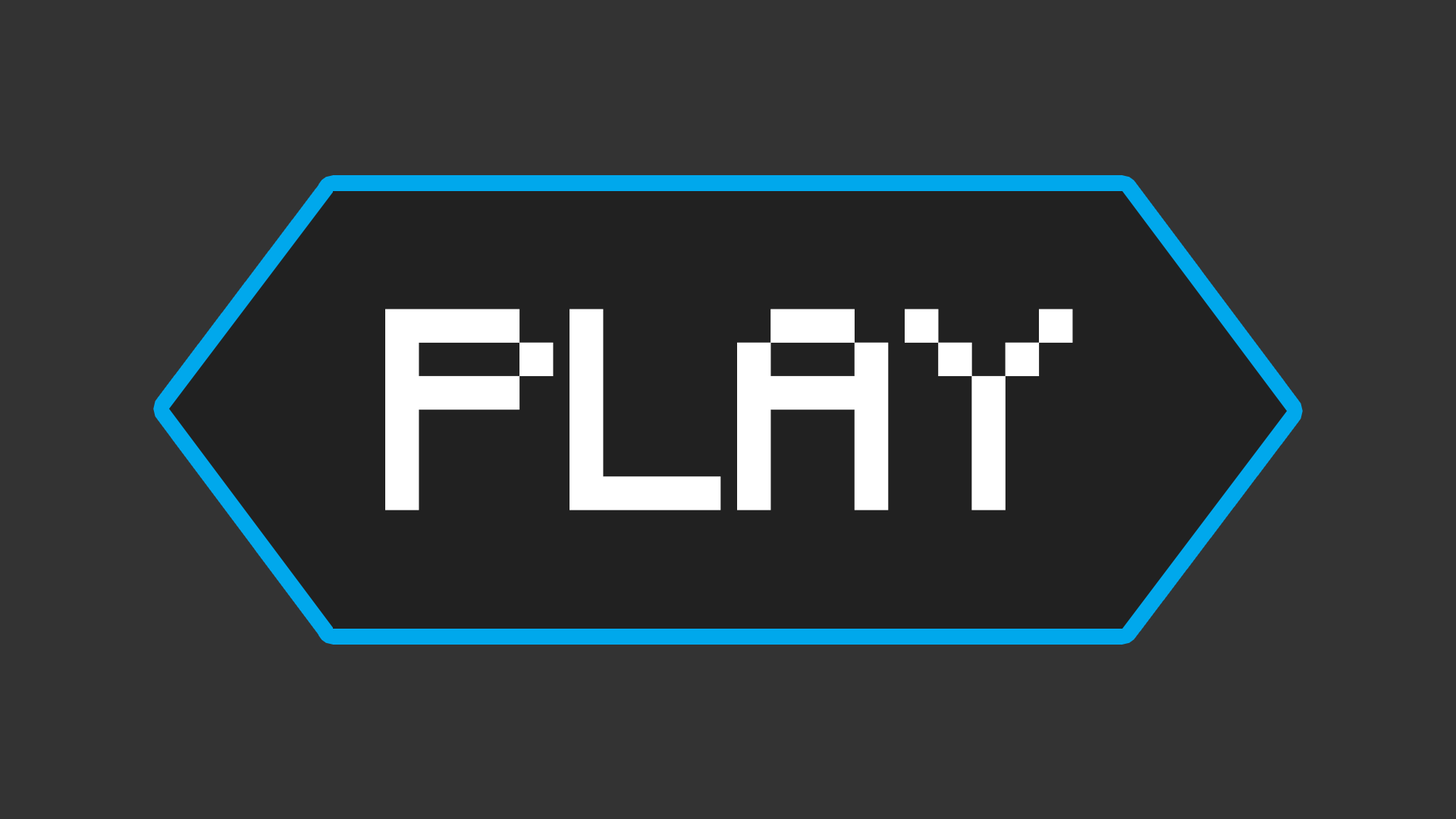
<style>
.page{position:relative;width:1456px;height:819px;background:#333333}
.page>*{position:absolute;margin:0}
.t1{font:267.9px "Minecraft";color:#ffffff}
</style>
<div class="page">
<p class="t1" style="left:385px;top:309px;width:688px;height:201px">PLAY</p>
</div>
